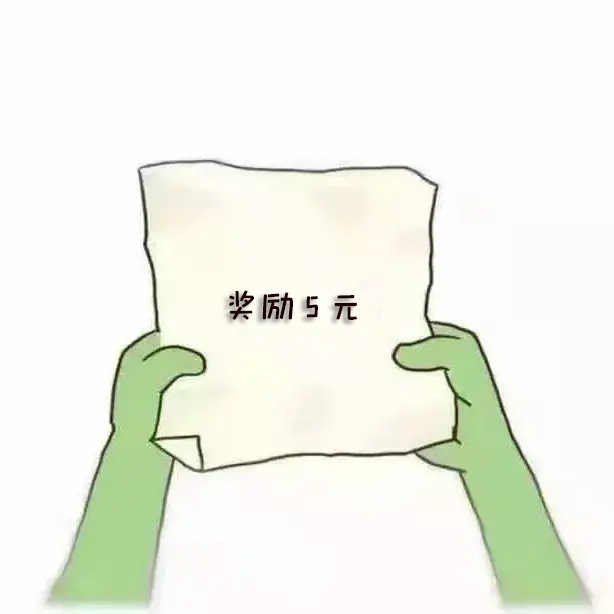
<style>
.page{position:relative;width:614px;height:614px;background:#fefefe}
.page>*{position:absolute;margin:0}
.t1{font:36px "xiaodanchunti";color:#1c0303}
</style>
<div class="page">
<p class="t1" style="left:229px;top:290px;width:128px;height:30px">奖励5元</p>
</div>
